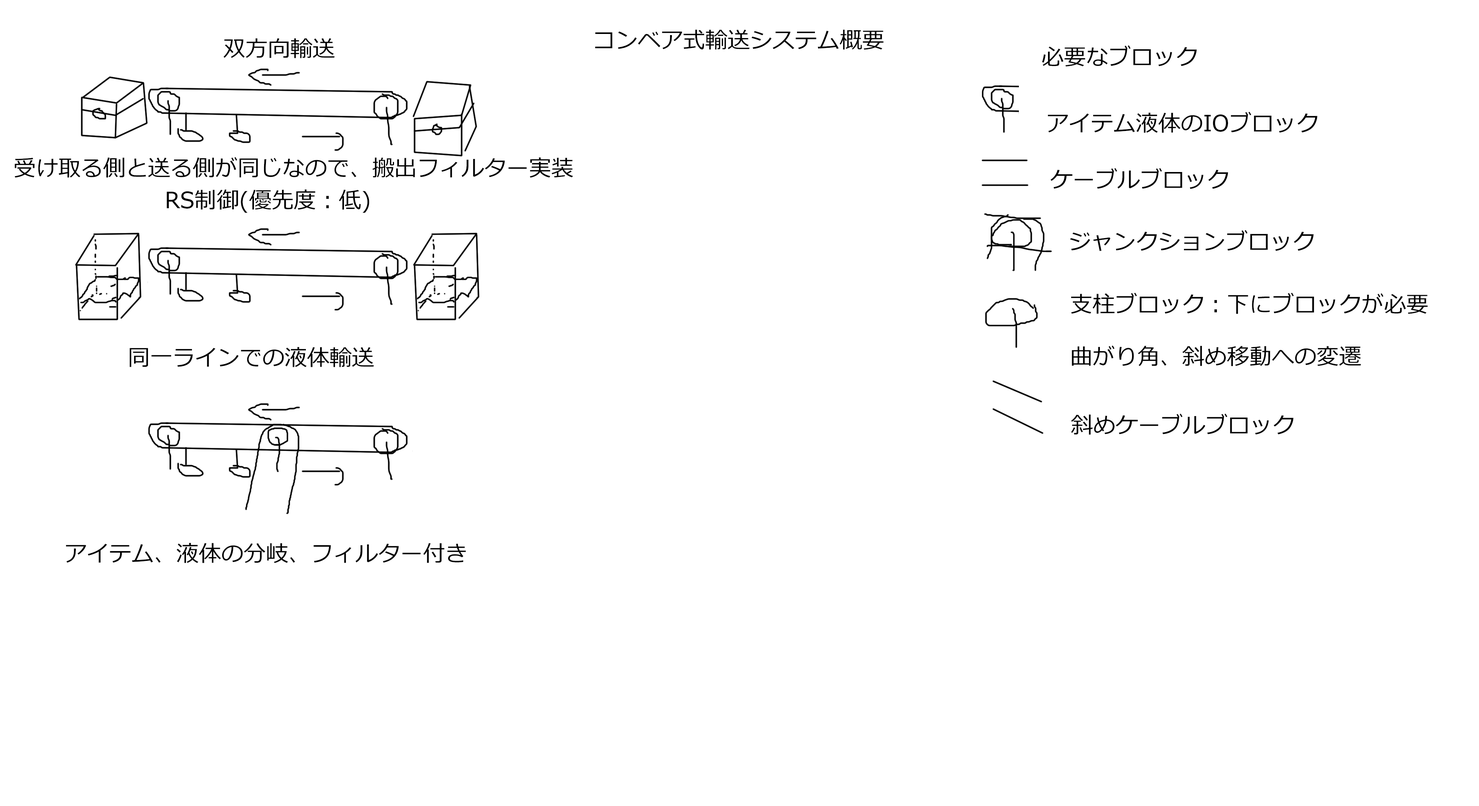
<style>
.page{position:relative;width:1479px;height:806px;background:#ffffff}
.page>*{position:absolute;margin:0}
.t1{font:22.4px "Meiryo";color:#000000}
.t2{font:22.4px/52.3px "Meiryo";color:#000000}
</style>
<div class="page">
<p class="t1" style="left:595px;top:29px;width:288px;height:21px">コンベア式輸送システム概要</p>
<p class="t1" style="left:223px;top:38px;width:112px;height:20px">双方向輸送</p>
<p class="t1" style="left:1042px;top:45px;width:154px;height:21px">必要なブロック</p>
<p class="t1" style="left:1047px;top:112px;width:270px;height:21px">アイテム液体のIOブロック</p>
<p class="t1" style="left:15px;top:157px;width:558px;height:21px">受け取る側と送る側が同じなので、搬出フィルター実装</p>
<p class="t1" style="left:1050px;top:168px;width:178px;height:21px">ケーブルブロック</p>
<p class="t1" style="left:167px;top:189px;width:202px;height:24px">RS制御(優先度：低)</p>
<p class="t1" style="left:1070px;top:230px;width:243px;height:21px">ジャンクションブロック</p>
<p class="t2" style="left:1071px;top:293px;width:356px;height:73px">支柱ブロック：下にブロックが必要<br>曲がり角、斜め移動への変遷</p>
<p class="t1" style="left:130px;top:347px;width:244px;height:20px">同一ラインでの液体輸送</p>
<p class="t1" style="left:1071px;top:414px;width:222px;height:21px">斜めケーブルブロック</p>
<p class="t1" style="left:66px;top:543px;width:400px;height:20px">アイテム、液体の分岐、フィルター付き</p>
</div>
